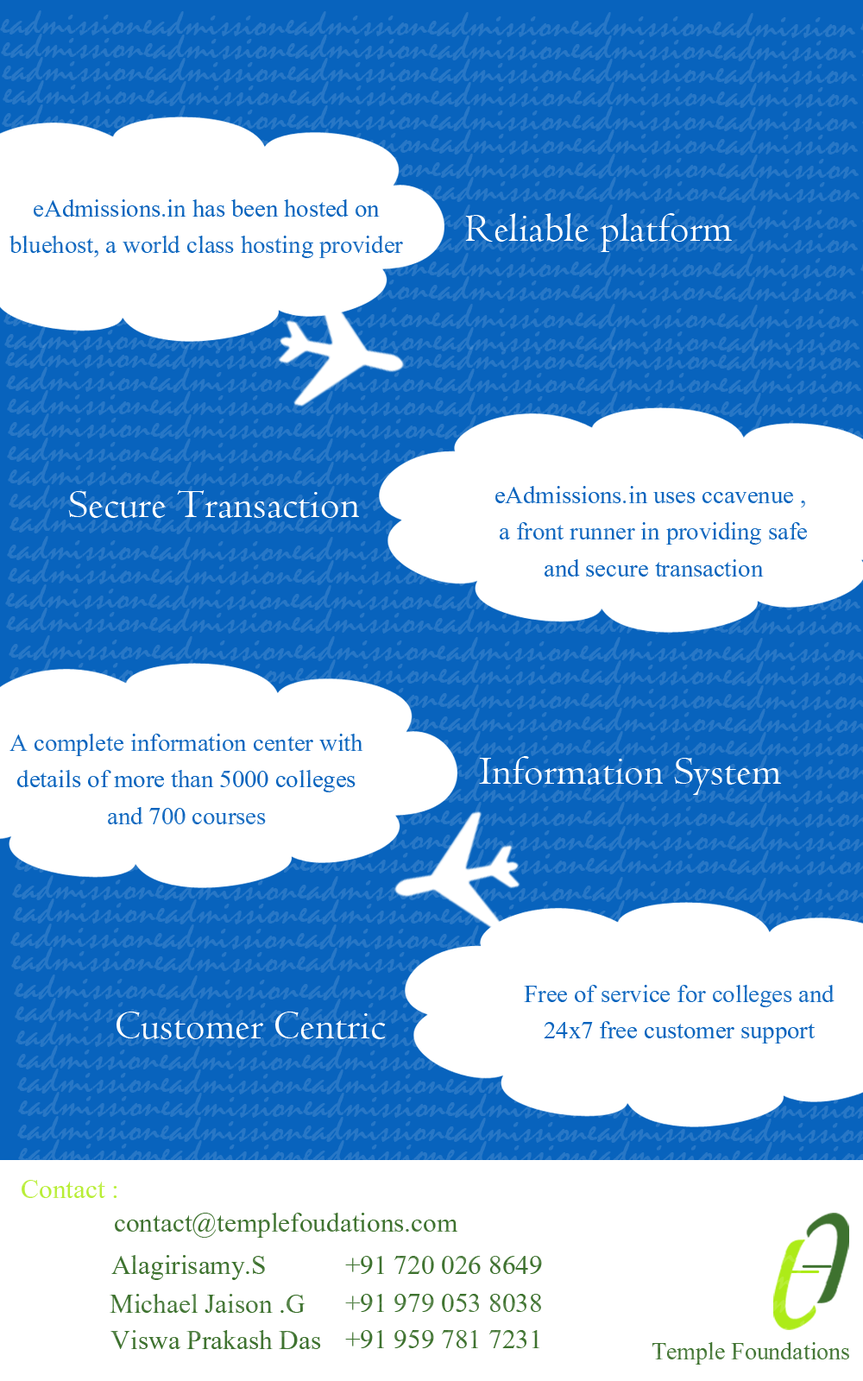
<style>
.page{position:relative;width:863px;height:1381px;background:#ffffff}
.page>*{position:absolute;margin:0}
.t1{font:30.7px "Aparajita";color:#0863bd}
.t2{font:41.8px "Centaur";color:#ffffff}
.t3{font:33.6px "Aparajita";color:#b8ee36}
.t4{font:33.6px "Aparajita";color:#3e722f}
.t5{font:30px "Aparajita"}
</style>
<div class="page">
<p class="t1" style="left:9px;top:199px;width:394px;height:59px;text-align:center">eAdmissions.in has been hosted on<br>bluehost, a world class hosting provider</p>
<p class="t2" style="left:465px;top:213px;width:268px;height:39px">Reliable platform</p>
<p class="t2" style="left:68px;top:490px;width:291px;height:28px">Secure Transaction</p>
<p class="t1" style="left:496px;top:486px;width:311px;height:91px;text-align:center">eAdmissions.in uses ccavenue , <br>a front runner in providing safe<br>and secure transaction</p>
<p class="t1" style="left:9px;top:734px;width:354px;height:90px;text-align:center">A complete information center with<br>details of more than 5000 colleges<br>and 700 courses</p>
<p class="t2" style="left:479px;top:756px;width:303px;height:39px">Information System</p>
<p class="t1" style="left:524px;top:985px;width:311px;height:59px;text-align:center">Free of service for colleges and<br>24x7 free customer support</p>
<p class="t2" style="left:117px;top:1012px;width:269px;height:27px">Customer Centric</p>
<p class="t3" style="left:22px;top:1180px;width:95px;height:18px">Contact :</p>
<p class="t4" style="left:115px;top:1213px;width:343px;height:25px">contact@templefoudations.com</p>
<p class="t4" style="left:111px;top:1255px;width:154px;height:25px">Alagirisamy.S</p>
<p class="t4" style="left:345px;top:1256px;width:197px;height:18px">+91 720 026 8649</p>
<p class="t4" style="left:110px;top:1294px;width:196px;height:19px">Michael Jaison .G</p>
<p class="t4" style="left:345px;top:1294px;width:196px;height:18px">+91 979 053 8038</p>
<p class="t4" style="left:111px;top:1330px;width:210px;height:19px">Viswa Prakash Das</p>
<p class="t4" style="left:345px;top:1330px;width:195px;height:18px">+91 959 781 7231</p>
<p class="t5" style="left:652px;top:1342px;width:197px;height:23px">Temple Foundations</p>
</div>
